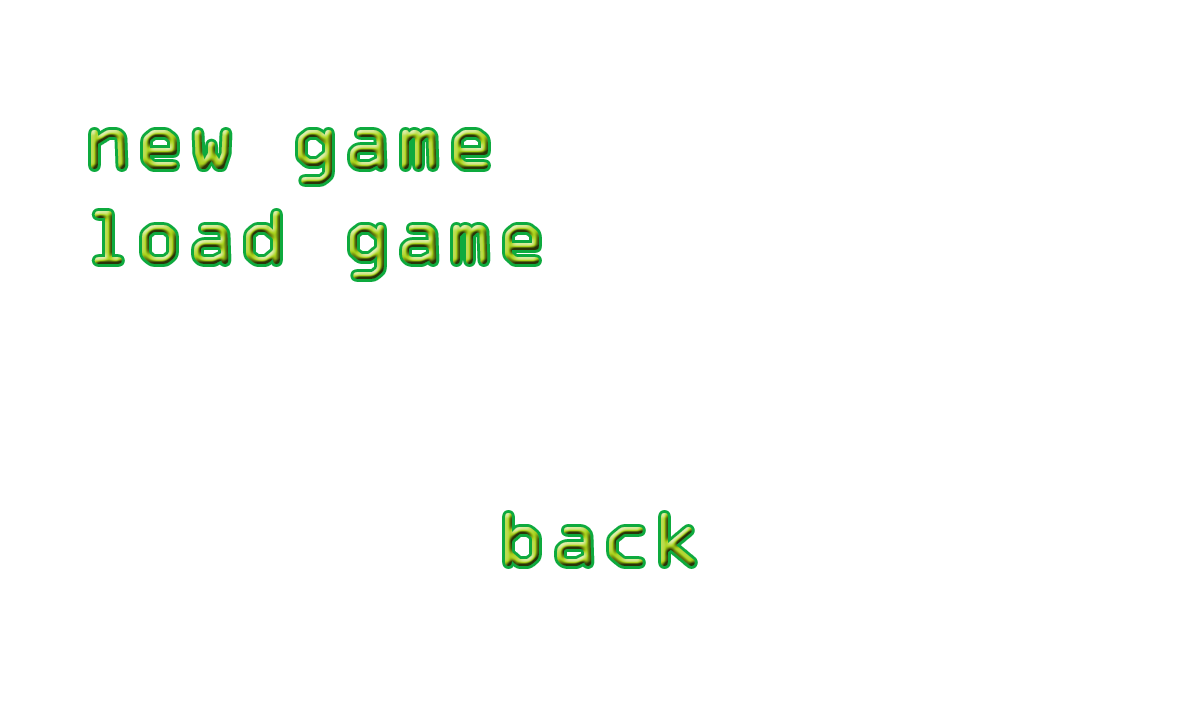
<style>
.page{position:relative;width:1200px;height:720px;background:#ffffff}
.page>*{position:absolute;margin:0}
.t1{font:72px "OCRAStd"}
</style>
<div class="page">
<p class="t1" style="left:91px;top:130px;width:397px;height:54px">new game</p>
<p class="t1" style="left:94px;top:211px;width:445px;height:68px">load game</p>
<p class="t1" style="left:505px;top:513px;width:190px;height:53px">back</p>
</div>
